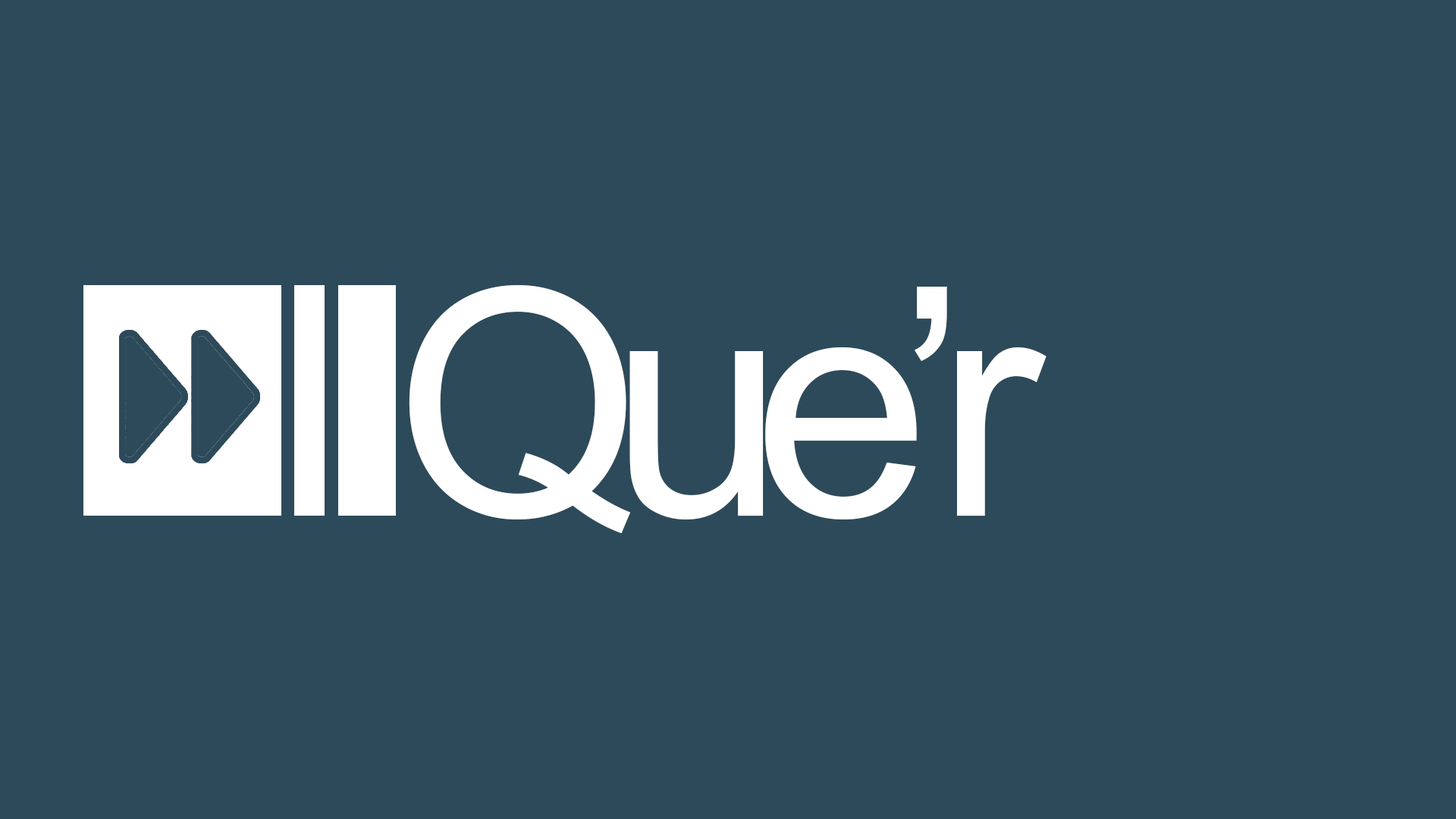
<style>
.page{position:relative;width:1456px;height:819px;background:#2d4a5a}
.page>*{position:absolute;margin:0}
.t1{font:316px "ArialMT";letter-spacing:-0.1em;color:#ffffff}
</style>
<div class="page">
<p class="t1" style="left:409px;top:285px;width:637px;height:249px">Que’r</p>
</div>
